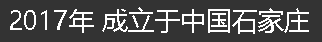
<style>
.page{position:relative;width:322px;height:42px;background:#333333}
.page>*{position:absolute;margin:0}
.t1{font:26px "MicrosoftYaHei";color:#ffffff}
</style>
<div class="page">
<p class="t1" style="left:10px;top:7px;width:299px;height:27px">2017年 成立于中国石家庄</p>
</div>
